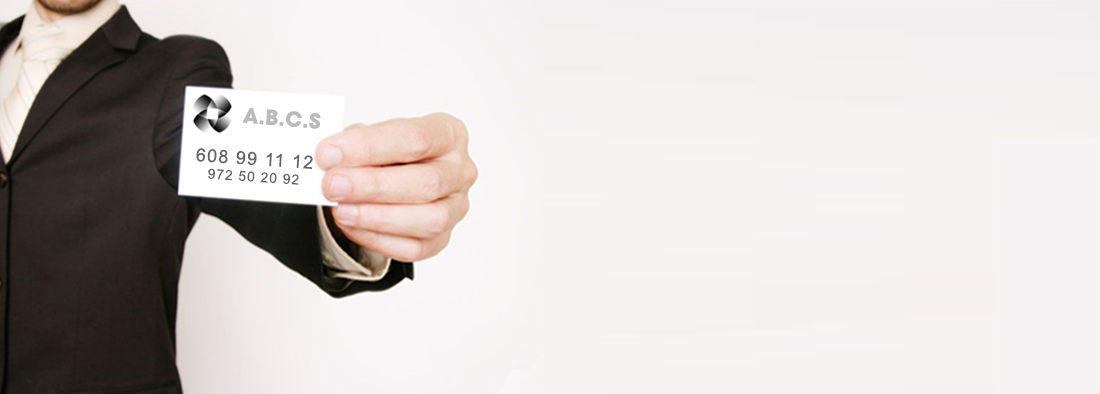
<style>
.page{position:relative;width:1100px;height:394px}
.page>*{position:absolute;margin:0}
.t1{font:18px "ArialMT";letter-spacing:0.07em;color:#676464}
.t2{font:13.9px "ArialMT";letter-spacing:0.07em;color:#676464}
</style>
<div class="page">
<p class="t1" style="left:196px;top:148px;width:117px;height:37px;text-align:center;rotate:4deg">608 99 11 12<br><span class="t2">972 50 20 92</span></p>
</div>
